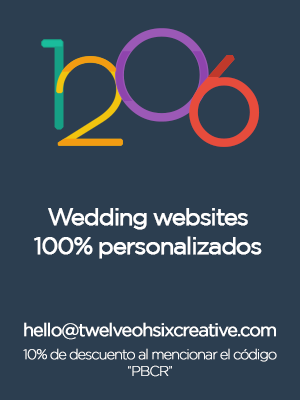
<style>
.page{position:relative;width:300px;height:400px;background:#2c3e50}
.page>*{position:absolute;margin:0}
.t1{font:113.7px "PoiretOne-Regular";letter-spacing:-0.075em;color:#9b59b6;font-weight:bold}
.t2{font:113.7px "PoiretOne-Regular";letter-spacing:-0.075em;color:#16a085;font-weight:bold}
.t3{font:113.7px "PoiretOne-Regular";letter-spacing:-0.075em;color:#e74c3c;font-weight:bold}
.t4{font:24px "Gotham-Book";letter-spacing:-0.075em;color:#ffffff;font-weight:bold}
.t5{font:18px "Gotham-Book";letter-spacing:-0.075em;color:#ffffff;font-weight:bold}
.t6{font:14px "Gotham-ExtraLight";letter-spacing:-0.075em;color:#ffffff;font-weight:bold}
</style>
<div class="page">
<p class="t1" style="left:115px;top:28px;width:94px;height:94px">0</p>
<p class="t2" style="left:41px;top:39px;width:23px;height:91px">1</p>
<p class="t3" style="left:189px;top:55px;width:71px;height:92px">6</p>
<p class="t4" style="left:34px;top:208px;width:228px;height:51px;text-align:center">Wedding websites<br>100% personalizados</p>
<p class="t5" style="left:24px;top:322px;width:252px;height:18px">hello@twelveohsixcreative.com</p>
<p class="t6" style="left:23px;top:348px;width:254px;height:29px;text-align:center">10% de descuento al mencionar el código<br>“PBCR”</p>
</div>
